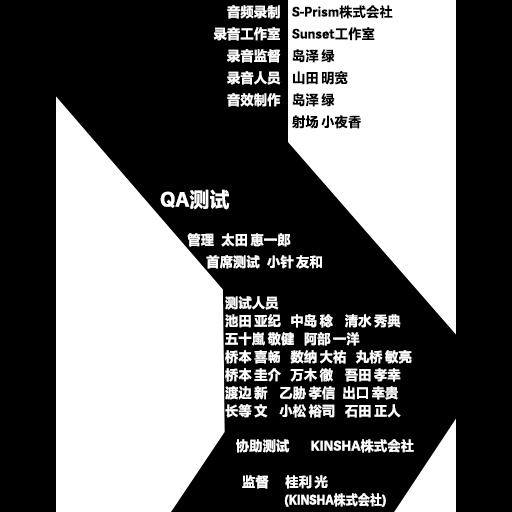
<style>
.page{position:relative;width:512px;height:512px;background:#000000}
.page>*{position:absolute;margin:0}
.t1{font:13.5px/22px "FZLTHProGlobal-Bold";letter-spacing:0.005em;color:#ffffff}
.t2{font:13.5px/22px "FZLTHProGlobal-Bold";letter-spacing:0.005em;color:#000000}
.t3{font:20.2px "FZLTHProGlobal-Bold";letter-spacing:0.005em;color:#ffffff}
.t4{font:13.5px/18px "FZLTHProGlobal-Bold";letter-spacing:0.005em;color:#ffffff}
.t5{font:13.5px "FZLTHProGlobal-Bold";letter-spacing:0.005em;color:#ffffff}
.t6{font:13.5px/18px "FZLTHProGlobal-Bold";letter-spacing:0.005em;color:#ffffff;scale:0.89 1}
</style>
<div class="page">
<p class="t1" style="left:213px;top:5px;width:68px;height:102px;text-align:right">音频录制<br>录音工作室<br>录音监督<br>录音人员<br>音效制作</p>
<p class="t2" style="left:292px;top:5px;width:101px;height:124px">S-Prism株式会社<br>Sunset工作室<br>岛泽 绿<br>山田 明宽<br>岛泽 绿<br>射场 小夜香</p>
<p class="t3" style="left:160px;top:189px;width:70px;height:21px">QA测试</p>
<p class="t1" style="left:187px;top:233px;width:135px;height:36px">管理   太田 恵一郎<br>         首席测试   小针 友和</p>
<p class="t4" style="left:225px;top:296px;width:187px;height:122px">测试人员<br>池田 亚纪    中岛 稔     清水 秀典<br>五十嵐 敬健    阿部 一洋<br>桥本 喜畅    数纳 大祐    丸桥 敏亮<br>桥本 圭介    万木 徹     吾田 孝幸<br>渡边 新     乙胁 孝信   出口 幸贵<br>长等 文     小松 裕司    石田 正人</p>
<p class="t5" style="left:236px;top:439px;width:178px;height:14px">协助测试         KINSHA株式会社</p>
<p class="t4" style="left:242px;top:475px;width:144px;height:32px">监督       桂利 光<br>                  <span class="t6">(KINSHA株式会社)</span></p>
</div>
